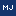
<style>
.page{position:relative;width:16px;height:16px;background:#15356d}
.page>*{position:absolute;margin:0}
.t1{font:9px "Silkscreen-Expanded";color:#ffffff}
</style>
<div class="page">
<p class="t1" style="left:3px;top:5px;width:5px;height:5px">M</p>
<p class="t1" style="left:9px;top:5px;width:4px;height:5px">J</p>
</div>
